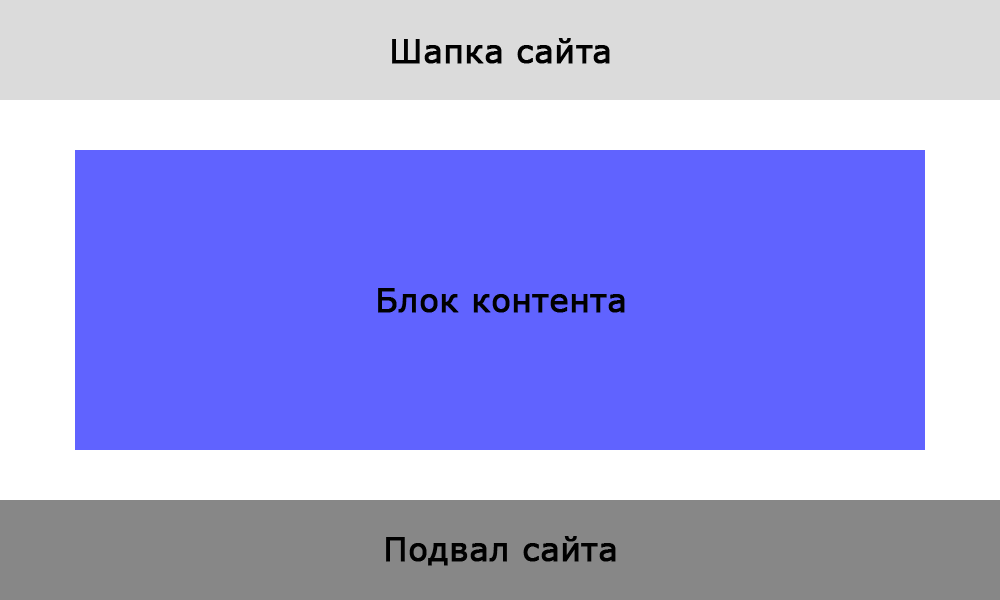
<style>
.page{position:relative;width:1000px;height:600px;background:#6063ff}
.page>*{position:absolute;margin:0}
.t1{font:32px "Verdana";color:#000000;font-weight:bold}
</style>
<div class="page">
<p class="t1" style="left:392px;top:38px;width:218px;height:26px">Шапка сайта</p>
<p class="t1" style="left:378px;top:288px;width:247px;height:25px">Блок контента</p>
<p class="t1" style="left:386px;top:536px;width:230px;height:30px">Подвал сайта</p>
</div>
